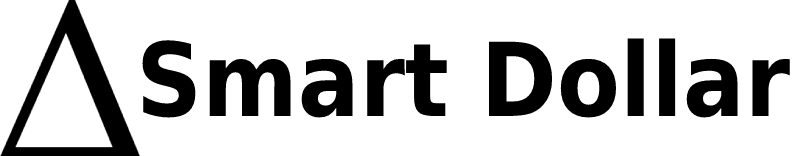
<style>
.page{position:relative;width:794px;height:156px;background:#ffffff}
.page>*{position:absolute;margin:0}
.t1{font:102px "DejaVuSansCondensed-Bold";color:#000000}
</style>
<div class="page">
<p class="t1" style="left:142px;top:38px;width:648px;height:80px">Smart Dollar</p>
</div>
